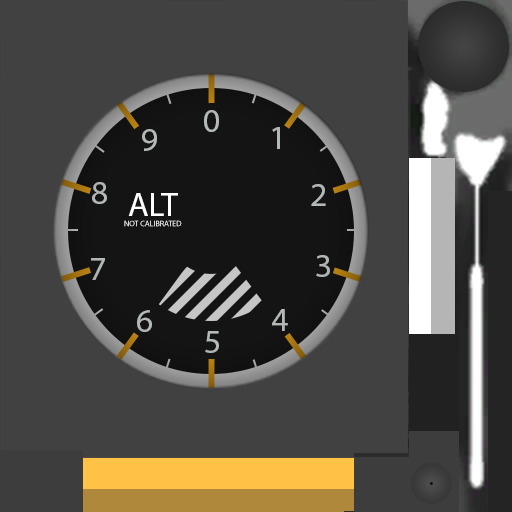
<style>
.page{position:relative;width:512px;height:512px;background:#414141}
.page>*{position:absolute;margin:0}
.t1{font:34px "MyriadPro-Regular";color:#b4b9b9}
.t2{font:34px "MyriadPro-Regular";color:#b3b8b8}
.t3{font:34px "MyriadPro-Regular";color:#b0b5b5}
.t4{font:34px "MyriadPro-Regular";color:#ffffff}
.t5{font:8px "MyriadPro-Regular"}
.t6{font:34px "MyriadPro-Regular";color:#b1b6b6}
</style>
<div class="page">
<p class="t1" style="left:204px;top:110px;width:15px;height:22px">0</p>
<p class="t1" style="left:142px;top:129px;width:15px;height:22px">9</p>
<p class="t2" style="left:272px;top:127px;width:8px;height:22px">1</p>
<p class="t3" style="left:92px;top:182px;width:15px;height:22px">8</p>
<p class="t2" style="left:311px;top:184px;width:15px;height:22px">2</p>
<p class="t4" style="left:128px;top:193px;width:50px;height:23px">ALT</p>
<p class="t5" style="left:124px;top:220px;width:58px;height:7px">NOT CALIBRATED</p>
<p class="t3" style="left:316px;top:255px;width:14px;height:22px">3</p>
<p class="t6" style="left:91px;top:258px;width:14px;height:22px">7</p>
<p class="t2" style="left:137px;top:310px;width:15px;height:22px">6</p>
<p class="t2" style="left:272px;top:309px;width:16px;height:22px">4</p>
<p class="t1" style="left:205px;top:331px;width:14px;height:22px">5</p>
</div>
